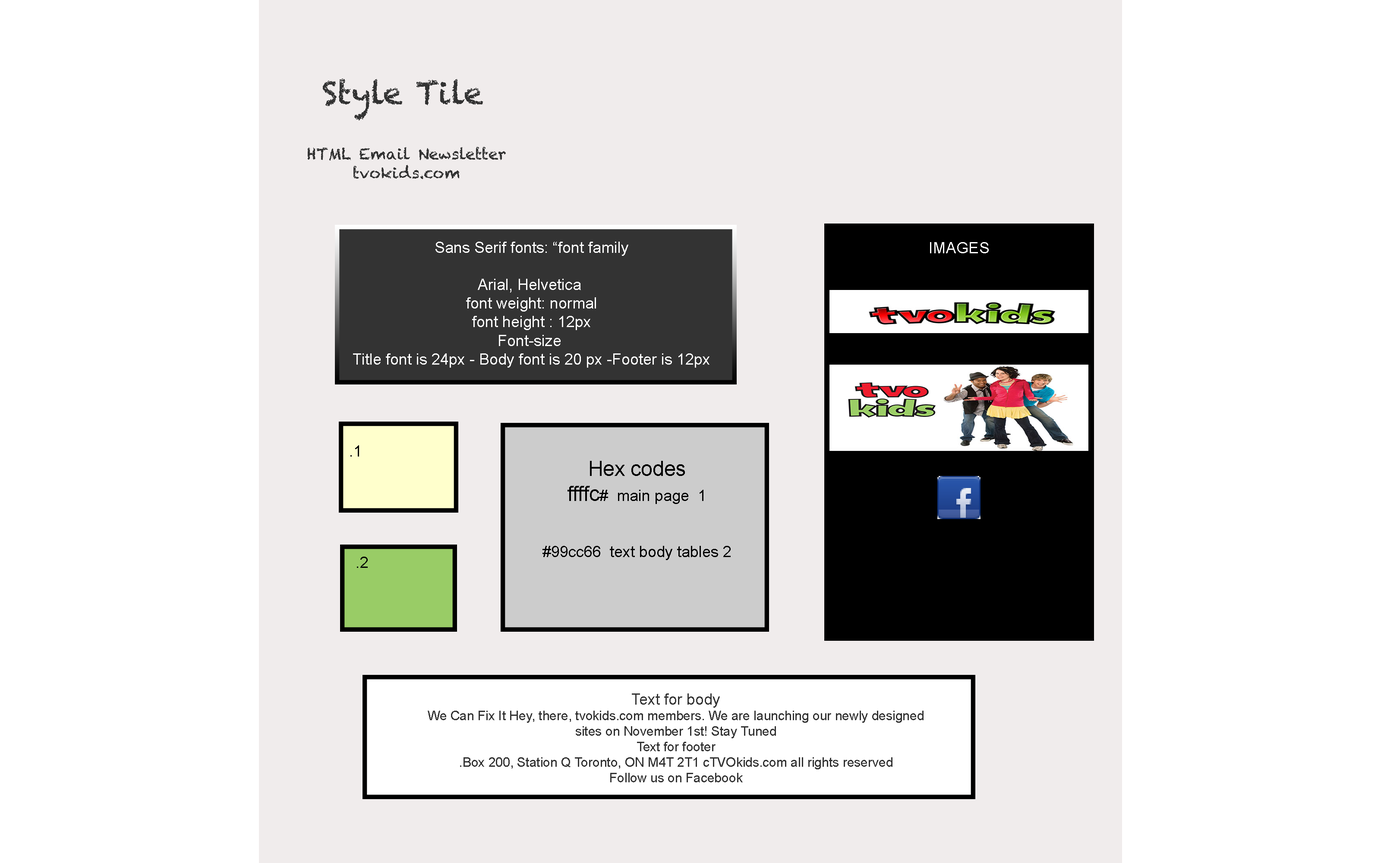
<style>
.page{position:relative;width:1381px;height:863px;background:#ffffff}
.page>*{position:absolute;margin:0}
.t1{font:15.5px "Chalkduster";color:#333333}
.t2{font:31.1px "Chalkduster";color:#333333}
.t3{font:15.5px "ArialMT";color:#ffffff}
.t4{font:15.5px "ArialMT";color:#000000}
.t5{font:20.7px "ArialMT";color:#000000}
.t6{font:12.9px "ArialMT";color:#333333}
.t7{font:15.5px "ArialMT";color:#333333}
</style>
<div class="page">
<p class="t1" style="left:308px;top:79px;width:198px;height:100px;text-align:center"><span class="t2">Style Tile<br><br></span>HTML Email Newsletter <br>tvokids.com</p>
<p class="t3" style="left:353px;top:242px;width:357px;height:126px;text-align:center">Sans Serif fonts: “font family <br><br>Arial, Helvetica<br>font weight: normal <br>font height : 12px <br>Font-size<br>Title font is 24px - Body font is 20 px -Footer is 12px</p>
<p class="t3" style="left:930px;top:242px;width:59px;height:11px"><span class="t4"><br></span>IMAGES</p>
<p class="t4" style="left:350px;top:445px;width:9px;height:12px">1.</p>
<p class="t4" style="left:543px;top:461px;width:188px;height:99px;text-align:center"><span class="t5">Hex codes<br>ffffc</span>#  main page  1 <br><br><br>#99cc66  text body tables 2</p>
<p class="t4" style="left:357px;top:557px;width:11px;height:11px">2.</p>
<p class="t6" style="left:428px;top:694px;width:496px;height:89px;text-align:center"><span class="t7"><br>Text for body<br></span>We Can Fix It Hey, there, tvokids.com members. We are launching our newly designed <br>sites on November 1st! Stay Tuned<br>Text for footer<br>Box 200, Station Q Toronto, ON M4T 2T1 cTVOkids.com all rights reserved. <br>Follow us on Facebook</p>
</div>
